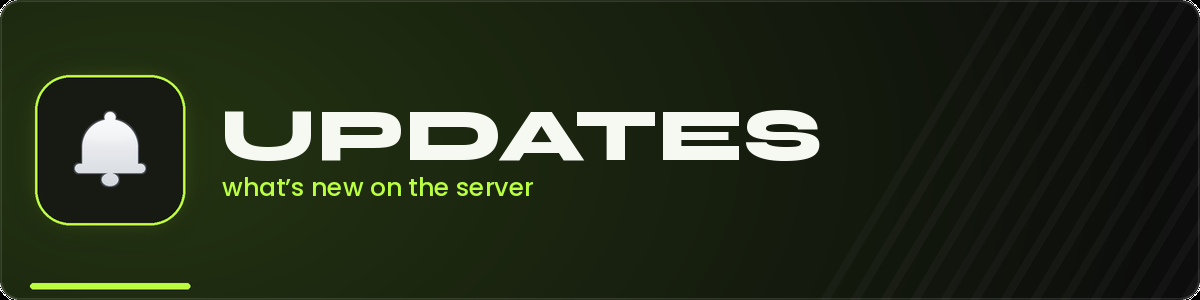
<style>
.page{position:relative;width:1200px;height:300px}
.page>*{position:absolute;margin:0}
.t1{font:75px "Syne-ExtraBold";color:#f6f8f2}
.t2{font:25px "Poppins-Medium";color:#baff40}
</style>
<div class="page">
<p class="t1" style="left:225px;top:110px;width:595px;height:51px">UPDATES</p>
<p class="t2" style="left:222px;top:177px;width:311px;height:19px">what’s new on the server</p>
</div>
